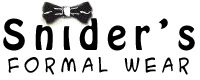
<style>
.page{position:relative;width:200px;height:80px;background:#ffffff}
.page>*{position:absolute;margin:0}
.t1{font:18.7px "ACMESecretAgent";letter-spacing:0.24em;color:#000000}
</style>
<div class="page">
<p class="t1" style="left:8px;top:57px;width:181px;height:18px">Formal Wear</p>
</div>
